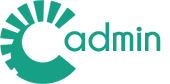
<style>
.page{position:relative;width:170px;height:84px;background:#ffffff}
.page>*{position:absolute;margin:0}
.t1{font:41px "Champagne&Limousines-Bold";color:#16a085}
</style>
<div class="page">
<p class="t1" style="left:64px;top:22px;width:97px;height:30px">admin</p>
</div>
